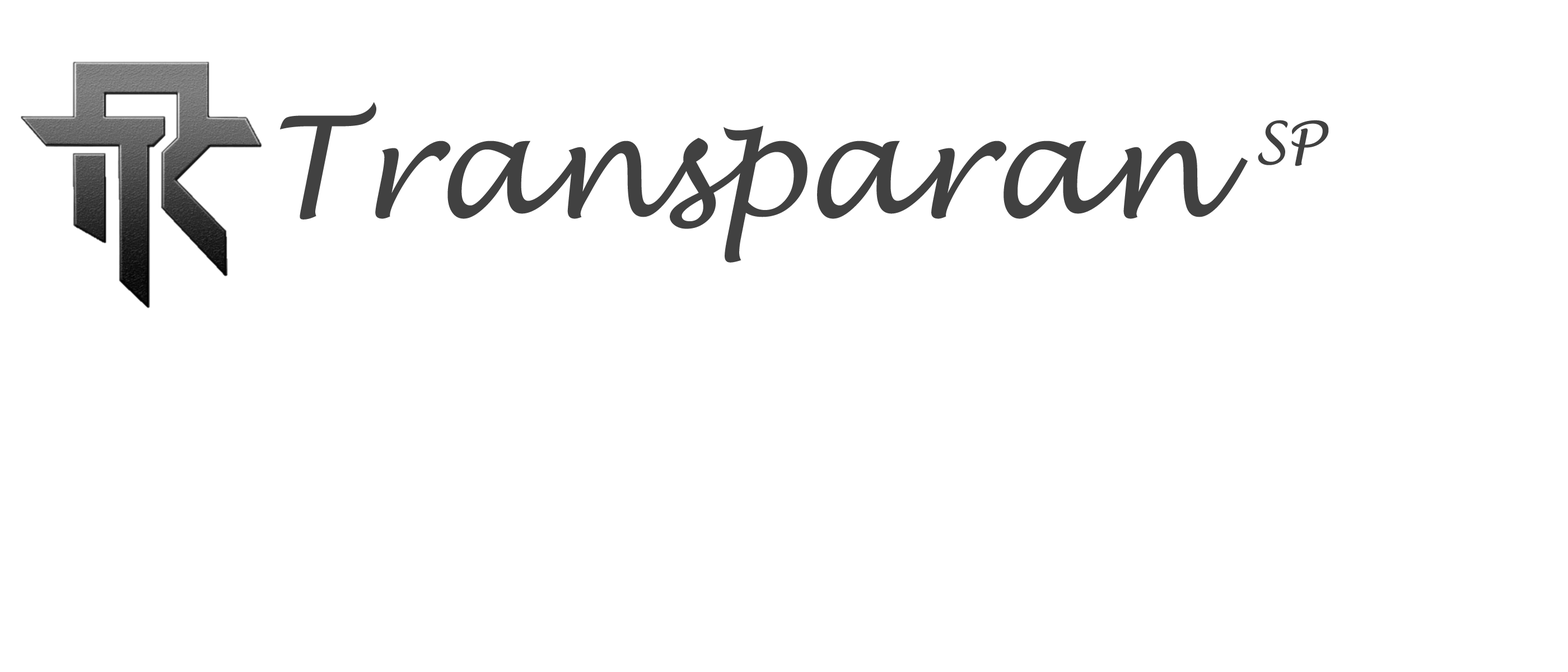
<style>
.page{position:relative;width:1568px;height:672px;background:#ffffff}
.page>*{position:absolute;margin:0}
.t1{font:140px "LucidaHandwriting-Italic";color:#414141}
.t2{font:56px "LucidaHandwriting-Italic";color:#414141}
</style>
<div class="page">
<p class="t1" style="left:280px;top:102px;width:968px;height:161px">Transparan</p>
<p class="t2" style="left:1258px;top:120px;width:71px;height:46px">SP</p>
</div>
